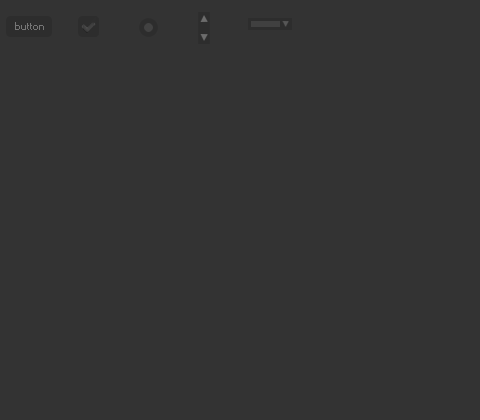
<style>
.page{position:relative;width:480px;height:420px;background:#333333}
.page>*{position:absolute;margin:0}
.t1{font:10px "Tahoma";color:#767676}
</style>
<div class="page">
<p class="t1" style="left:15px;top:22px;width:29px;height:8px">button</p>
</div>
